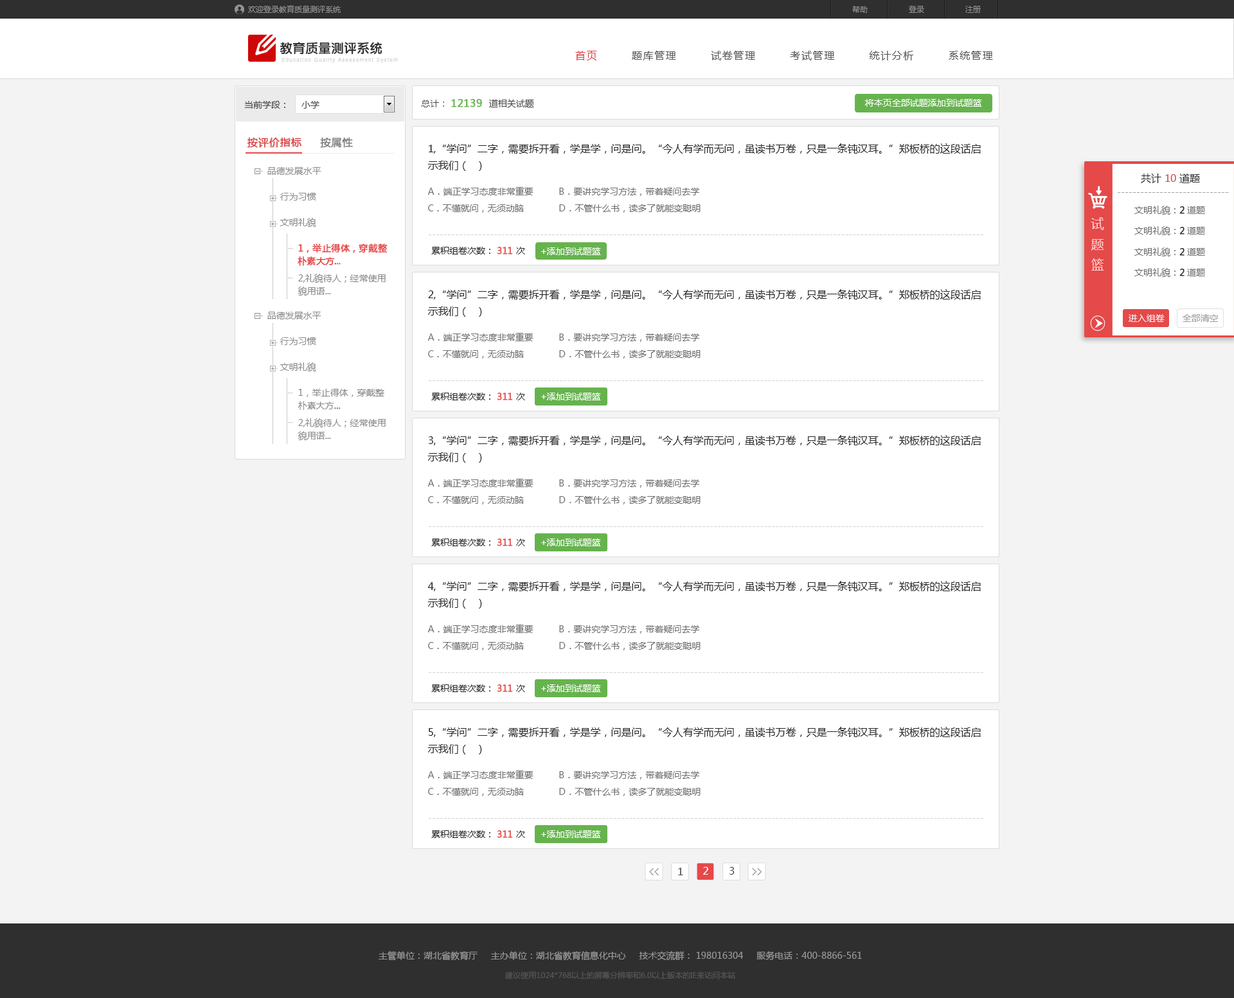
<style>
.page{position:relative;width:1234px;height:998px;background:#f3f3f3}
.page>*{position:absolute;margin:0}
.t1{font:7.7px "MicrosoftYaHei";color:#929292}
.t2{font:12.9px "FZY4JW--GB1-0";color:#323232}
.t3{font:10.3px "MicrosoftYaHei";letter-spacing:0.1em;color:#555555}
.t4{font:10.3px "MicrosoftYaHei";letter-spacing:0.1em;color:#e43636}
.t5{font:5.1px "ArialMT";letter-spacing:0.16em;color:#d4d4d4}
.t6{font:9px "MicrosoftYaHei";color:#434343}
.t7{font:9px "MicrosoftYaHei";color:#4a4a4a}
.t8{font:10.3px "MicrosoftYaHei";color:#66b34e;font-weight:bold}
.t9{font:9px "MicrosoftYaHei";color:#ffffff}
.t10{font:10.3px "MicrosoftYaHei";color:#db4848;font-weight:bold}
.t11{font:10.3px "MicrosoftYaHei";color:#7e7e7e;font-weight:bold}
.t12{font:10.3px/16.7px "MicrosoftYaHei";color:#252424}
.t13{font:9px/25.7px "MicrosoftYaHei";color:#898989}
.t14{font:9px/12.9px "MicrosoftYaHei";color:#e54141;font-weight:bold}
.t15{font:9px/12.9px "MicrosoftYaHei";color:#898989;font-weight:bold}
.t16{font:9px/17.4px "MicrosoftYaHei";color:#898989}
.t17{font:9px/12.9px "MicrosoftYaHei";color:#898989}
.t18{font:10.3px "MicrosoftYaHei";color:#2f2f2f}
.t19{font:10.3px "MicrosoftYaHei";color:#d34848}
.t20{font:9px/16.7px "MicrosoftYaHei";color:#6e6e6e}
.t21{font:9px "MicrosoftYaHei";color:#a0a0a0}
.t22{font:9px "MicrosoftYaHei";color:#6e6e6e}
.t23{font:9px "MicrosoftYaHei";color:#2f2f2f;font-weight:bold}
.t24{font:12.9px/20.6px "MicrosoftYaHei";color:#ffd3d3}
.t25{font:9px "MicrosoftYaHei";color:#d4d2d2}
.t26{font:9px "MicrosoftYaHei";color:#252424}
.t27{font:9px "MicrosoftYaHei";color:#e54949;font-weight:bold}
.t28{font:9px "MicrosoftYaHei";color:#9d9d9d}
.t29{font:9px "MicrosoftYaHei";color:#fefeff}
.t30{font:10.2px "SimSun"}
.t31{font:10.2px "MicrosoftYaHei";color:#434445}
.t32{font:10.2px "MicrosoftYaHei";color:#ffffff}
.t33{font:9px/20.6px "MicrosoftYaHei";color:#999999}
.t34{font:7.7px/20.6px "MicrosoftYaHei";color:#565656}
</style>
<div class="page">
<p class="t1" style="left:248px;top:5px;width:93px;height:8px">欢迎登录教育质量测评系统</p>
<p class="t1" style="left:852px;top:6px;width:129px;height:7px">帮助                登录                注册</p>
<p class="t2" style="left:280px;top:42px;width:102px;height:13px">教育质量测评系统</p>
<p class="t3" style="left:575px;top:51px;width:418px;height:9px"><span class="t4">首页</span>        题库管理        试卷管理        考试管理        统计分析        系统管理</p>
<p class="t5" style="left:282px;top:57px;width:116px;height:6px">Education Quality Assessment System</p>
<p class="t6" style="left:244px;top:101px;width:41px;height:8px">当前学段：</p>
<p class="t7" style="left:302px;top:101px;width:18px;height:8px">小学</p>
<p class="t8" style="left:421px;top:99px;width:113px;height:9px"><span class="t7">总计： </span>12139  <span class="t7">道相关试题</span></p>
<p class="t9" style="left:865px;top:99px;width:117px;height:8px">将本页全部试题添加到试题篮</p>
<p class="t10" style="left:247px;top:138px;width:106px;height:10px">按评价指标     <span class="t11">按属性</span></p>
<p class="t12" style="left:428px;top:143px;width:553px;height:28px">1,“学问”二字，需要拆开看，学是学，问是问。“今人有学而无问，虽读书万卷，只是一条钝汉耳。”郑板桥的这段话启示我们（  ）</p>
<p class="t13" style="left:267px;top:167px;width:121px;height:129px">品德发展水平<br>     行为习惯<br>     文明礼貌<br>            <span class="t14">1，举止得体，穿戴整<br>         朴素大方.</span><span class="t15">..<br>   </span><span class="t16">         2,礼貌待人；经常使用<br></span><span class="t17">            貌用语...</span></p>
<p class="t18" style="left:1141px;top:174px;width:59px;height:9px">共计 <span class="t19">10</span> 道题</p>
<p class="t20" style="left:428px;top:187px;width:273px;height:26px">A．端正学习态度非常重要       B．要讲究学习方法，带着疑问去学  <br>C．不懂就问，无须动脑       D．不管什么书，读多了就能变聪明</p>
<p class="t21" style="left:1118px;top:192px;width:111px;height:1px">-----------------------------</p>
<p class="t22" style="left:1135px;top:206px;width:70px;height:9px">文明礼貌：<span class="t23">2</span> 道题</p>
<p class="t24" style="left:1091px;top:217px;width:13px;height:54px;text-align:center">试<br>题<br>篮</p>
<p class="t22" style="left:1135px;top:226px;width:70px;height:9px">文明礼貌：<span class="t23">2</span> 道题</p>
<p class="t25" style="left:429px;top:235px;width:555px;height:0px">------------------------------------------------------------------------------------------------------------------------------------------------</p>
<p class="t26" style="left:431px;top:247px;width:94px;height:8px">累积组卷次数： <span class="t27">311 </span>次</p>
<p class="t9" style="left:541px;top:248px;width:60px;height:7px">+添加到试题篮</p>
<p class="t22" style="left:1135px;top:248px;width:70px;height:8px">文明礼貌：<span class="t23">2</span> 道题</p>
<p class="t22" style="left:1135px;top:268px;width:70px;height:9px">文明礼貌：<span class="t23">2</span> 道题</p>
<p class="t12" style="left:428px;top:289px;width:553px;height:28px">2,“学问”二字，需要拆开看，学是学，问是问。“今人有学而无问，虽读书万卷，只是一条钝汉耳。”郑板桥的这段话启示我们（  ）</p>
<p class="t17" style="left:267px;top:312px;width:119px;height:128px"><span class="t13">品德发展水平<br>     行为习惯<br>     文明礼貌<br>           </span> 1，举止得体，穿戴整<br>            朴素大方<span class="t15">...<br>   </span><span class="t16">         2,礼貌待人；经常使用<br></span>            貌用语...</p>
<p class="t9" style="left:1129px;top:314px;width:36px;height:8px">进入组卷</p>
<p class="t28" style="left:1183px;top:314px;width:36px;height:8px">全部清空</p>
<p class="t20" style="left:428px;top:333px;width:273px;height:26px">A．端正学习态度非常重要       B．要讲究学习方法，带着疑问去学  <br>C．不懂就问，无须动脑       D．不管什么书，读多了就能变聪明</p>
<p class="t25" style="left:429px;top:381px;width:555px;height:0px">------------------------------------------------------------------------------------------------------------------------------------------------</p>
<p class="t26" style="left:431px;top:393px;width:94px;height:8px">累积组卷次数： <span class="t27">311 </span>次</p>
<p class="t9" style="left:541px;top:393px;width:60px;height:8px">+添加到试题篮</p>
<p class="t12" style="left:428px;top:435px;width:553px;height:28px">3,“学问”二字，需要拆开看，学是学，问是问。“今人有学而无问，虽读书万卷，只是一条钝汉耳。”郑板桥的这段话启示我们（  ）</p>
<p class="t20" style="left:428px;top:479px;width:273px;height:26px">A．端正学习态度非常重要       B．要讲究学习方法，带着疑问去学  <br>C．不懂就问，无须动脑       D．不管什么书，读多了就能变聪明</p>
<p class="t25" style="left:429px;top:526px;width:555px;height:1px">------------------------------------------------------------------------------------------------------------------------------------------------</p>
<p class="t26" style="left:431px;top:539px;width:94px;height:7px">累积组卷次数： <span class="t27">311 </span>次</p>
<p class="t29" style="left:541px;top:539px;width:60px;height:7px">+添加到试题篮</p>
<p class="t12" style="left:428px;top:581px;width:553px;height:28px">4,“学问”二字，需要拆开看，学是学，问是问。“今人有学而无问，虽读书万卷，只是一条钝汉耳。”郑板桥的这段话启示我们（  ）</p>
<p class="t20" style="left:428px;top:625px;width:273px;height:26px">A．端正学习态度非常重要       B．要讲究学习方法，带着疑问去学  <br>C．不懂就问，无须动脑       D．不管什么书，读多了就能变聪明</p>
<p class="t25" style="left:429px;top:672px;width:555px;height:1px">------------------------------------------------------------------------------------------------------------------------------------------------</p>
<p class="t26" style="left:431px;top:685px;width:94px;height:7px">累积组卷次数： <span class="t27">311 </span>次</p>
<p class="t29" style="left:541px;top:685px;width:60px;height:7px">+添加到试题篮</p>
<p class="t12" style="left:428px;top:727px;width:553px;height:28px">5,“学问”二字，需要拆开看，学是学，问是问。“今人有学而无问，虽读书万卷，只是一条钝汉耳。”郑板桥的这段话启示我们（  ）</p>
<p class="t20" style="left:428px;top:771px;width:273px;height:26px">A．端正学习态度非常重要       B．要讲究学习方法，带着疑问去学  <br>C．不懂就问，无须动脑       D．不管什么书，读多了就能变聪明</p>
<p class="t25" style="left:429px;top:818px;width:555px;height:1px">------------------------------------------------------------------------------------------------------------------------------------------------</p>
<p class="t26" style="left:431px;top:831px;width:94px;height:7px">累积组卷次数： <span class="t27">311 </span>次</p>
<p class="t29" style="left:541px;top:831px;width:60px;height:7px">+添加到试题篮</p>
<p class="t30" style="left:649px;top:869px;width:10px;height:7px">&lt;&lt;</p>
<p class="t31" style="left:678px;top:868px;width:5px;height:8px">1</p>
<p class="t32" style="left:703px;top:867px;width:5px;height:8px">2</p>
<p class="t31" style="left:730px;top:867px;width:5px;height:8px">3</p>
<p class="t30" style="left:752px;top:869px;width:10px;height:7px">&gt;&gt;</p>
<p class="t33" style="left:379px;top:951px;width:483px;height:29px;text-align:center">主管单位：湖北省教育厅     主办单位：湖北省教育信息化中心     技术交流群： 198016304     服务电话：400-8866-561<br><span class="t34">建议使用1024*768以上的屏幕分辨率和6.0以上版本的IE来访问本站</span></p>
</div>
